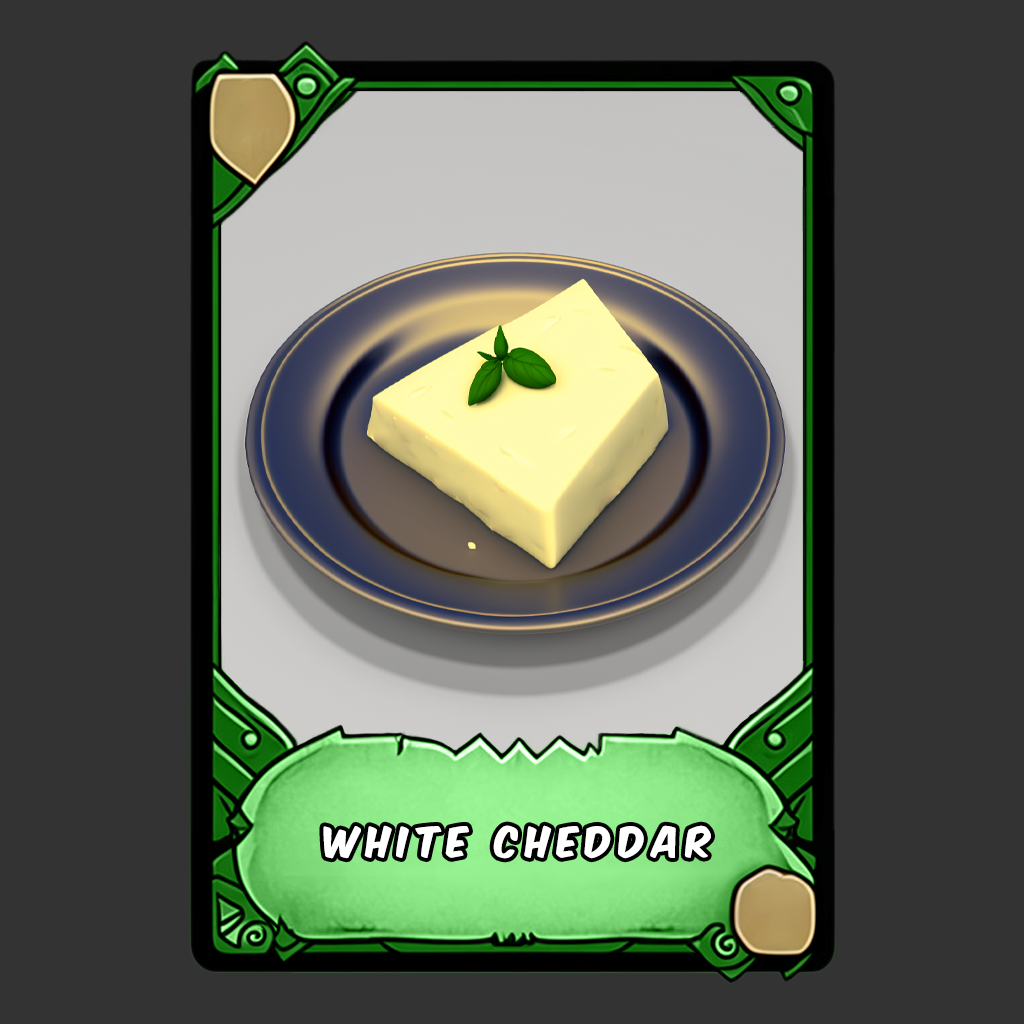
<style>
.page{position:relative;width:1024px;height:1024px;background:#333333}
.page>*{position:absolute;margin:0}
.t1{font:36px "KomikaAxis";letter-spacing:0.2em;color:#ffffff}
</style>
<div class="page">
<p class="t1" style="left:323px;top:825px;width:388px;height:34px">white cheddar</p>
</div>
